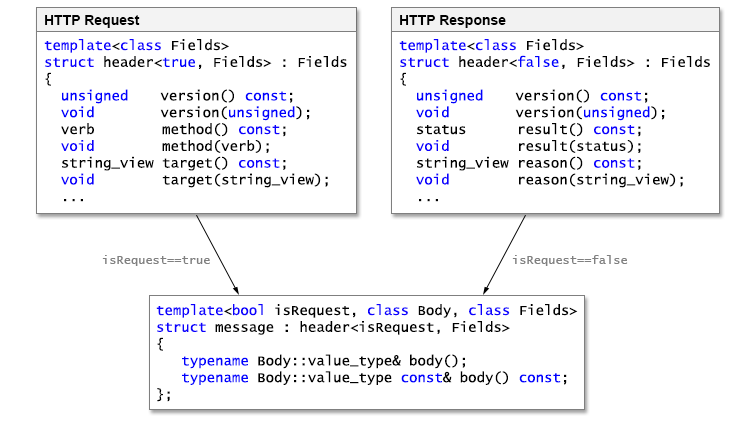
<style>
.page{position:relative;width:730px;height:428px;background:#ffffff}
.page>*{position:absolute;margin:0}
.t1{font:14px "Arial-BoldMT";color:#010101}
.t2{font:14px "LucidaConsole";color:#000000}
.t3{font:14px "LucidaConsole";color:#0c00ff}
.t4{font:14px "LucidaConsole";color:#0000ff}
.t5{font:12px "LucidaConsole";color:#808080}
</style>
<div class="page">
<p class="t1" style="left:45px;top:15px;width:95px;height:13px">HTTP Request</p>
<p class="t1" style="left:400px;top:15px;width:106px;height:13px">HTTP Response</p>
<p class="t2" style="left:44px;top:39px;width:303px;height:163px"><span class="t3">template</span>&lt;<span class="t3">class </span>Fields&gt;<br><span class="t3">struct </span>header&lt;<span class="t4">true</span>, Fields&gt; : Fields<br>{<br>  <span class="t4">unsigned</span>  version() <span class="t4">const</span>;<br>  <span class="t4">void</span>   version(<span class="t4">unsigned</span>);<br>  verb        method() <span class="t3">const</span>;<br>  <span class="t3">void</span>        method(verb);<br>  string_view target() <span class="t3">const</span>;<br>  <span class="t3">void</span>        target(string_view);<br>  ...</p>
<p class="t2" style="left:399px;top:39px;width:311px;height:163px"><span class="t3">template</span>&lt;<span class="t3">class </span>Fields&gt;<br><span class="t3">struct </span>header&lt;<span class="t4">false</span>, Fields&gt; : Fields<br>{<br>  <span class="t4">unsigned</span>  version() <span class="t4">const</span>;<br>  <span class="t4">void</span>   version(<span class="t4">unsigned</span>);<br>  status      result() <span class="t3">const</span>;<br><span class="t3">  void</span>        result(status);<br>  string_view reason() <span class="t3">const</span>;<br>  <span class="t3">void</span>        reason(string_view);<br>  ...</p>
<p class="t5" style="left:102px;top:255px;width:108px;height:11px">isRequest==true</p>
<p class="t5" style="left:512px;top:255px;width:116px;height:11px">isRequest==false</p>
<p class="t2" style="left:156px;top:304px;width:422px;height:98px"><span class="t3">template</span>&lt;<span class="t3">bool</span> isRequest, <span class="t3">class</span> Body, <span class="t3">class</span> Fields&gt;<br><span class="t3">struct </span>message : header&lt;isRequest, Fields&gt;<br>{<br>   <span class="t4">typename</span> Body::value_type&amp; body();<br>   <span class="t4">typename</span> Body::value_type <span class="t4">const</span>&amp; body() <span class="t4">const</span>;<br>};</p>
</div>
